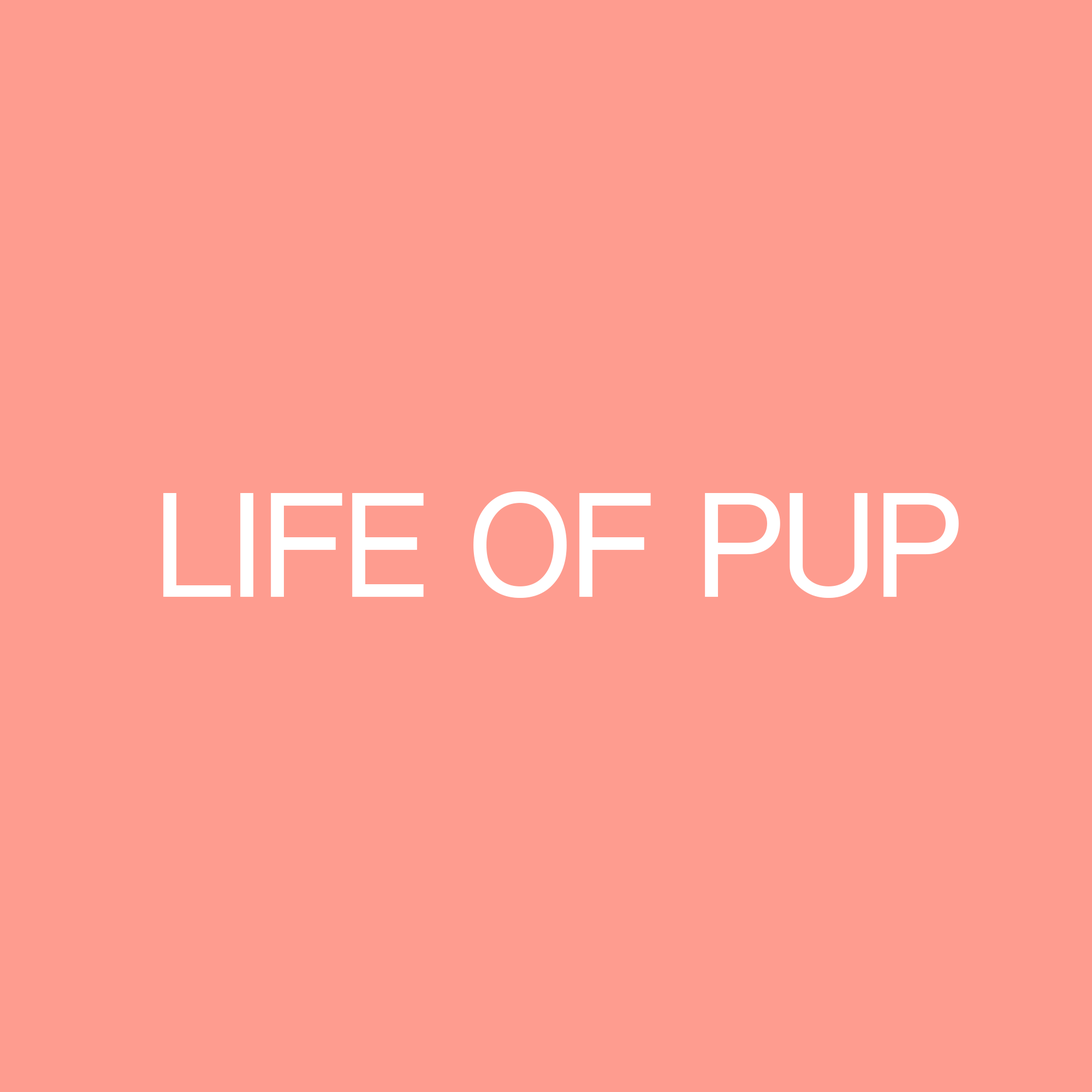
<style>
.page{position:relative;width:1092px;height:1092px;background:#fe9c8f}
.page>*{position:absolute;margin:0}
.t1{font:136.8px "ShreeDev0714-Bold";color:#ffffff}
</style>
<div class="page">
<p class="t1" style="left:163px;top:491px;width:796px;height:107px">LIFE OF PUP</p>
</div>
